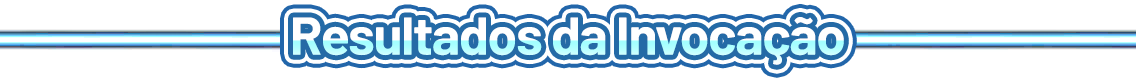
<style>
.page{position:relative;width:1136px;height:80px;background:#ffffff}
.page>*{position:absolute;margin:0}
.t1{font:53.3px "Barlow-Bold";letter-spacing:-0.025em}
</style>
<div class="page">
<p class="t1" style="left:293px;top:17px;width:551px;height:48px">Resultados da Invocação</p>
</div>
